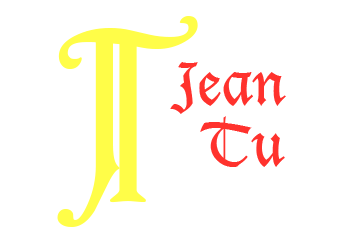
<style>
.page{position:relative;width:342px;height:250px;background:#ffffff}
.page>*{position:absolute;margin:0}
.t1{font:250.1px "Harrington";color:#fffd48}
.t2{font:58.4px "LucidaBlackletter";color:#ff322d}
</style>
<div class="page">
<p class="t1" style="left:58px;top:16px;width:140px;height:187px">T</p>
<p class="t1" style="left:57px;top:31px;width:66px;height:196px">J</p>
<p class="t2" style="left:170px;top:62px;width:116px;height:52px">Jean</p>
<p class="t2" style="left:200px;top:116px;width:85px;height:51px">Tu</p>
</div>
